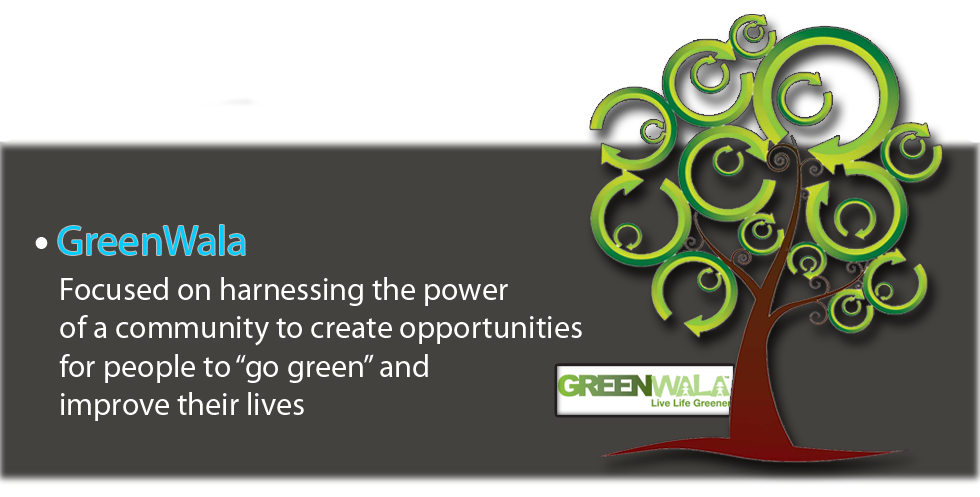
<style>
.page{position:relative;width:980px;height:497px;background:#44423e}
.page>*{position:absolute;margin:0}
.t1{font:42px "MyriadPro-Regular";color:#00ccff}
.t2{font:32px "MyriadPro-Regular";color:#ffffff}
</style>
<div class="page">
<p class="t1" style="left:58px;top:225px;width:187px;height:30px">GreenWala</p>
<p class="t2" style="left:59px;top:277px;width:523px;height:144px">Focused on harnessing the power<br>of a community to create opportunities<br>for people to “go green” and <br>improve their lives</p>
</div>
